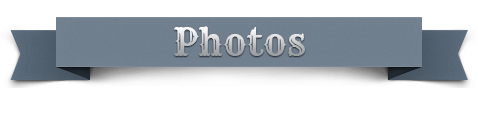
<style>
.page{position:relative;width:478px;height:124px;background:#ffffff}
.page>*{position:absolute;margin:0}
.t1{font:36px "Rye-Regular"}
</style>
<div class="page">
<p class="t1" style="left:174px;top:26px;width:131px;height:30px">Photos</p>
</div>
